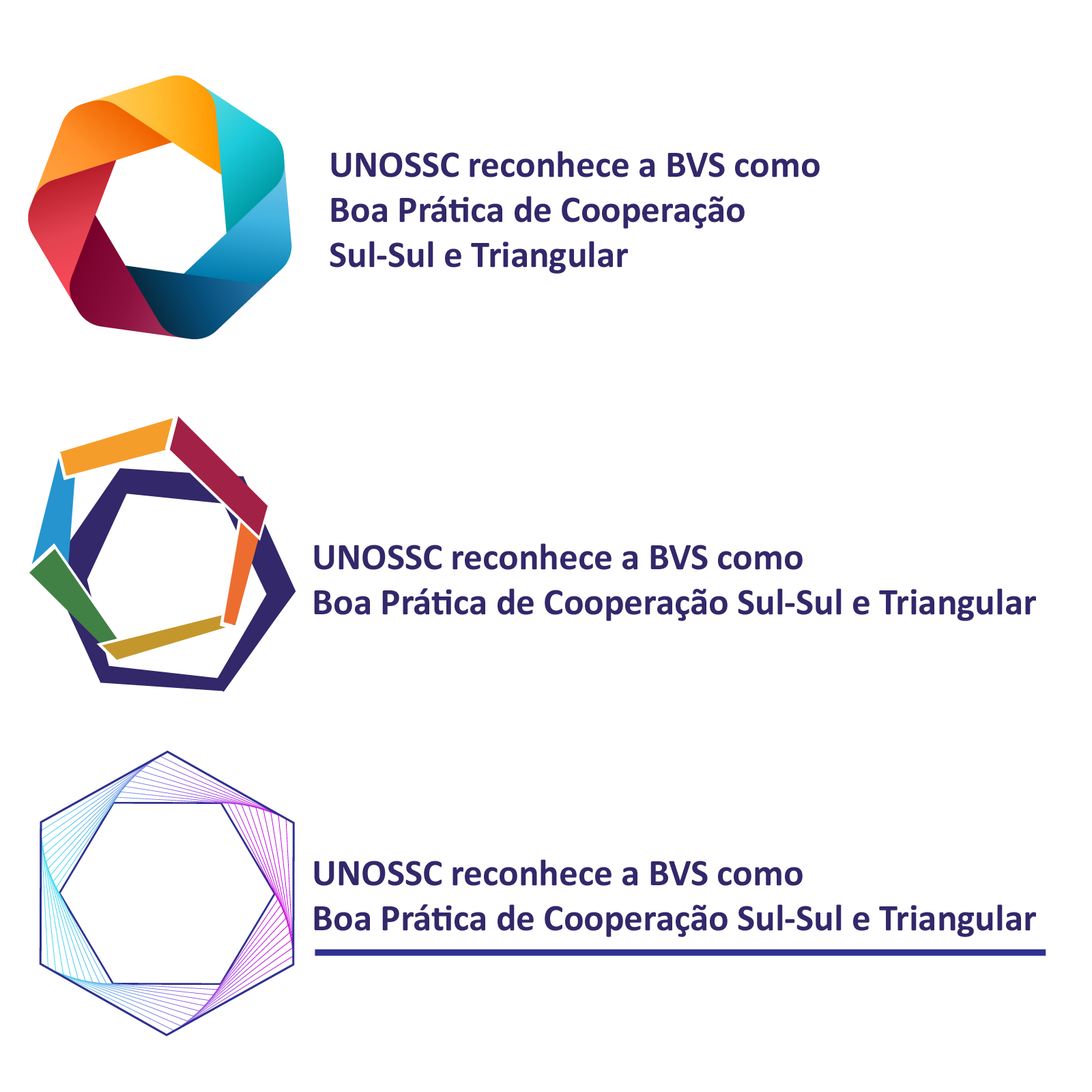
<style>
.page{position:relative;width:1092px;height:1092px;background:#ffffff}
.page>*{position:absolute;margin:0}
.t1{font:37.6px "Calibri-Bold";color:#32286a}
</style>
<div class="page">
<p class="t1" style="left:330px;top:151px;width:490px;height:123px">UNOSSC reconhece a BVS como<br>Boa Prática de Cooperação<br>Sul-Sul e Triangular</p>
<p class="t1" style="left:314px;top:543px;width:722px;height:78px">UNOSSC reconhece a BVS como<br>Boa Prática de Cooperação Sul-Sul e Triangular</p>
<p class="t1" style="left:314px;top:859px;width:722px;height:78px">UNOSSC reconhece a BVS como<br>Boa Prática de Cooperação Sul-Sul e Triangular</p>
</div>
